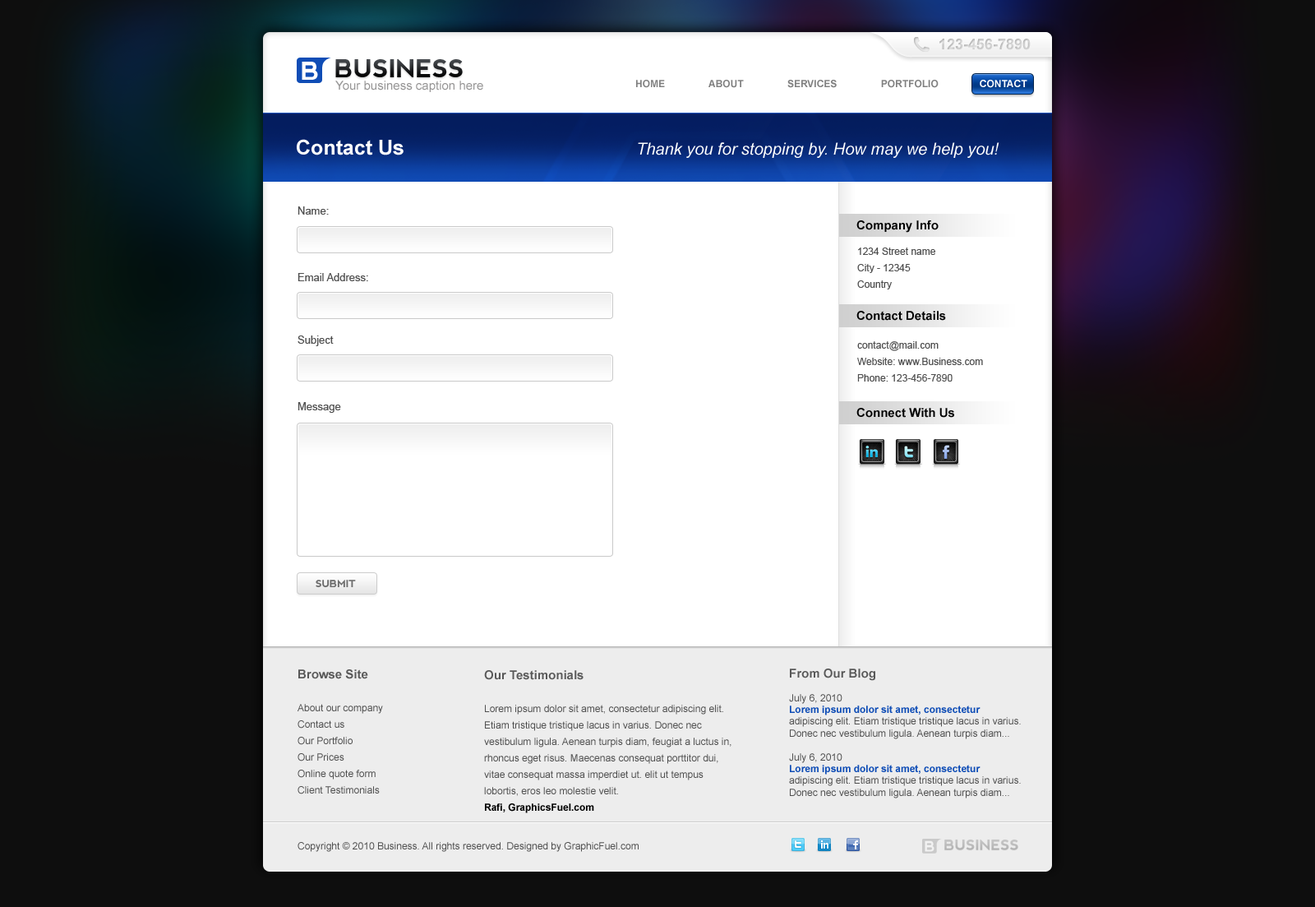
<style>
.page{position:relative;width:1315px;height:907px;background:#ffffff}
.page>*{position:absolute;margin:0}
.t1{font:14.8px "Arial-BoldMT";color:#c0c0c0;text-transform:uppercase}
.t2{font:24.7px "nevis-Bold";color:#ffffff;text-transform:uppercase}
.t3{font:24.7px "nevis-Bold";text-transform:uppercase}
.t4{font:12.3px "ArialMT";color:#969595}
.t5{font:9.9px "Arial-BoldMT";color:#808080;text-transform:uppercase}
.t6{font:9.9px "Arial-BoldMT";color:#ffffff;text-transform:uppercase}
.t7{font:20.5px "Arial-BoldMT";color:#ffffff}
.t8{font:16.4px "Arial-ItalicMT";color:#ffffff}
.t9{font:10.7px "ArialMT";color:#4f4f4f}
.t10{font:12.3px "Arial-BoldMT";color:#000000}
.t11{font:9.9px/16.4px "ArialMT";color:#4f4f4f}
.t12{font:9.9px "nevis-Bold";color:#6c6c6c;text-transform:uppercase}
.t13{font:12.3px/16.4px "Arial-BoldMT";color:#585858}
.t14{font:9.9px/16.4px "Arial-BoldMT";color:#000000}
.t15{font:9.9px "ArialMT";color:#4f4f4f}
.t16{font:9.9px "Arial-BoldMT";color:#0f4db6}
</style>
<div class="page">
<p class="t1" style="left:940px;top:39px;width:91px;height:11px">123-456-7890</p>
<p class="t2" style="left:302px;top:62px;width:16px;height:18px">b</p>
<p class="t3" style="left:335px;top:59px;width:128px;height:18px">business</p>
<p class="t4" style="left:335px;top:81px;width:148px;height:11px">Your business caption here</p>
<p class="t5" style="left:636px;top:80px;width:391px;height:8px">Home                About                Services                Portfolio              <span class="t6"> Contact</span></p>
<p class="t7" style="left:297px;top:139px;width:107px;height:16px">Contact Us</p>
<p class="t8" style="left:638px;top:142px;width:362px;height:16px">Thank you for stopping by. How may we help you!</p>
<p class="t9" style="left:298px;top:206px;width:31px;height:9px">Name:</p>
<p class="t10" style="left:857px;top:220px;width:82px;height:13px">Company Info</p>
<p class="t11" style="left:857px;top:247px;width:78px;height:42px">1234 Street name <br>City - 12345<br>Country</p>
<p class="t9" style="left:298px;top:273px;width:70px;height:8px">Email Address:</p>
<p class="t10" style="left:857px;top:311px;width:89px;height:10px">Contact Details</p>
<p class="t9" style="left:298px;top:335px;width:36px;height:11px">Subject</p>
<p class="t11" style="left:857px;top:341px;width:126px;height:40px">contact@mail.com<br>Website: www.Business.com<br>Phone: 123-456-7890</p>
<p class="t9" style="left:298px;top:402px;width:43px;height:11px">Message</p>
<p class="t10" style="left:857px;top:408px;width:97px;height:10px">Connect With Us</p>
<p class="t12" style="left:316px;top:580px;width:40px;height:8px">submit</p>
<p class="t11" style="left:298px;top:669px;width:85px;height:125px"><span class="t13">Browse Site<br><br></span>About our company<br>Contact us<br>Our Portfolio<br>Our Prices<br>Online quote form<br>Client Testimonials</p>
<p class="t11" style="left:484px;top:670px;width:248px;height:143px"><span class="t13">Our Testimonials<br><br></span>Lorem ipsum dolor sit amet, consectetur adipiscing elit. Etiam tristique tristique lacus in varius. Donec nec vestibulum ligula. Aenean turpis diam, feugiat a luctus in, rhoncus eget risus. Maecenas consequat porttitor dui, vitae consequat massa imperdiet ut. elit ut tempus lobortis, eros leo molestie velit.<br><span class="t14">Rafi, GraphicsFuel.com</span></p>
<p class="t15" style="left:789px;top:668px;width:232px;height:130px"><span class="t13">From Our Blog<br></span><br>July 6, 2010<br><span class="t16">Lorem ipsum dolor sit amet, consectetur <br></span>adipiscing elit. Etiam tristique tristique lacus in varius. Donec nec vestibulum ligula. Aenean turpis diam...<br><br>July 6, 2010<br><span class="t16">Lorem ipsum dolor sit amet, consectetur <br></span>adipiscing elit. Etiam tristique tristique lacus in varius. Donec nec vestibulum ligula. Aenean turpis diam...</p>
<p class="t15" style="left:298px;top:842px;width:341px;height:10px">Copyright © 2010 Business. All rights reserved. Designed by GraphicFuel.com</p>
</div>
